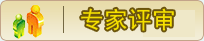
<style>
.page{position:relative;width:204px;height:41px}
.page>*{position:absolute;margin:0}
.t1{font:24px "SimHei";color:#f5e000}
</style>
<div class="page">
<p class="t1" style="left:81px;top:8px;width:93px;height:23px">专家评审</p>
</div>
